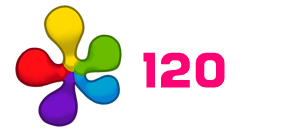
<style>
.page{position:relative;width:300px;height:132px;background:#ffffff}
.page>*{position:absolute;margin:0}
.t1{font:58px "DistantGalaxy"}
</style>
<div class="page">
<p class="t1" style="left:139px;top:49px;width:90px;height:42px">120</p>
</div>
